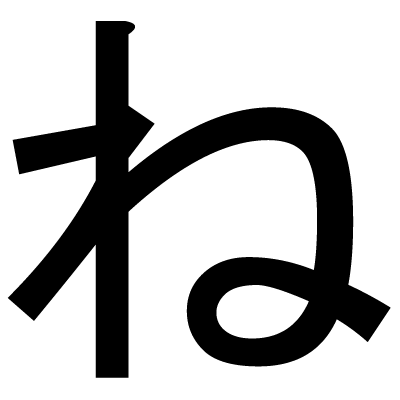
<style>
.page{position:relative;width:400px;height:400px;background:#ffffff}
.page>*{position:absolute;margin:0}
.t1{font:416.7px "MS-PGothic";color:#000000}
</style>
<div class="page">
<p class="t1" style="left:7px;top:21px;width:384px;height:357px">ね</p>
</div>
